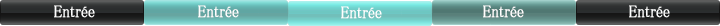
<style>
.page{position:relative;width:720px;height:26px}
.page>*{position:absolute;margin:0}
.t1{font:17.1px "MS-PMincho";color:#ffffff;font-weight:bold;scale:0.84 1}
</style>
<div class="page">
<p class="t1" style="left:54px;top:5px;width:41px;height:13px">Entrée</p>
<p class="t1" style="left:198px;top:5px;width:41px;height:13px">Entrée</p>
<p class="t1" style="left:341px;top:6px;width:41px;height:13px">Entrée</p>
<p class="t1" style="left:483px;top:5px;width:41px;height:13px">Entrée</p>
<p class="t1" style="left:629px;top:5px;width:41px;height:13px">Entrée</p>
</div>
